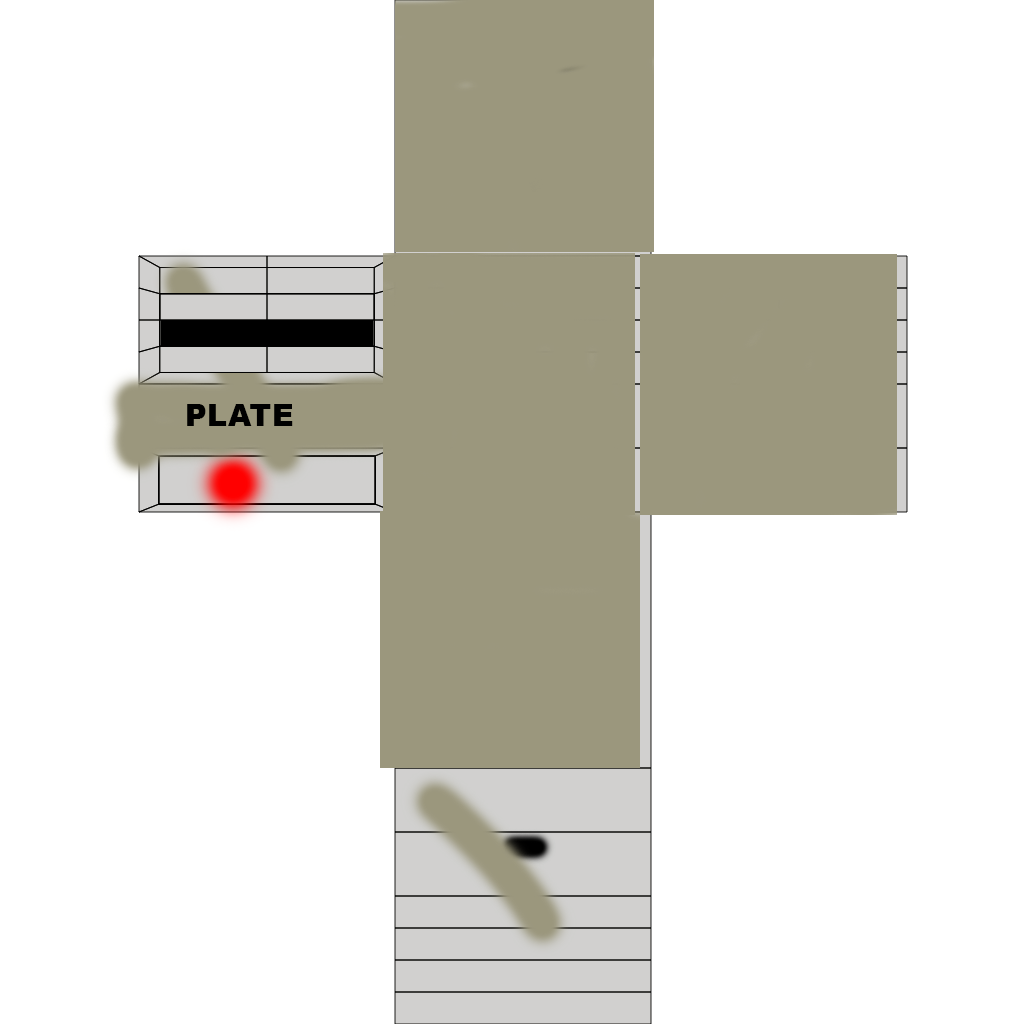
<style>
.page{position:relative;width:1024px;height:1024px;background:#ffffff}
.page>*{position:absolute;margin:0}
.t1{font:30px "Arial-Black";letter-spacing:0.02em;color:#000000}
</style>
<div class="page">
<p class="t1" style="left:187px;top:404px;width:106px;height:22px">PLATE</p>
</div>
